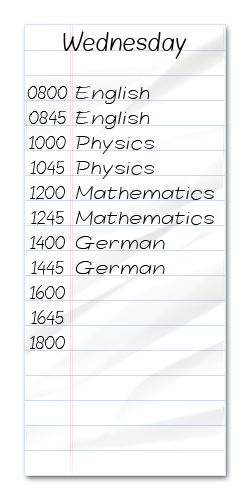
<style>
.page{position:relative;width:250px;height:500px;background:#ffffff}
.page>*{position:absolute;margin:0}
.t1{font:20px "Blokletters-Balpen";color:#000000}
.t2{font:14px/25px "Blokletters-Potlood";color:#000000}
.t3{font:14px/25px "Blokletters-Potlood";color:#000000;scale:1.5 1}
</style>
<div class="page">
<p class="t1" style="left:63px;top:31px;width:124px;height:28px">Wednesday</p>
<p class="t2" style="left:27px;top:86px;width:41px;height:263px;text-align:center">0800<br>0845<br>1000<br>1045<br>1200<br>1245<br>1400<br>1445<br>1600<br>1645<br>1800</p>
<p class="t3" style="left:75px;top:86px;width:139px;height:189px">English<br>English<br>Physics<br>Physics<br>Mathematics<br>Mathematics<br>German<br>German</p>
</div>
